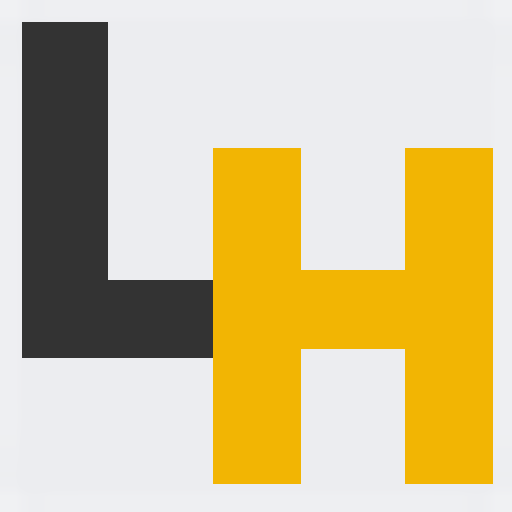
<style>
.page{position:relative;width:512px;height:512px;background:#ecedf0}
.page>*{position:absolute;margin:0}
.t1{font:480px "Intro";color:#333333}
.t2{font:480px "Intro";color:#f2b503}
</style>
<div class="page">
<p class="t1" style="left:22px;top:22px;width:208px;height:336px">L</p>
<p class="t2" style="left:213px;top:148px;width:280px;height:336px">H</p>
</div>
